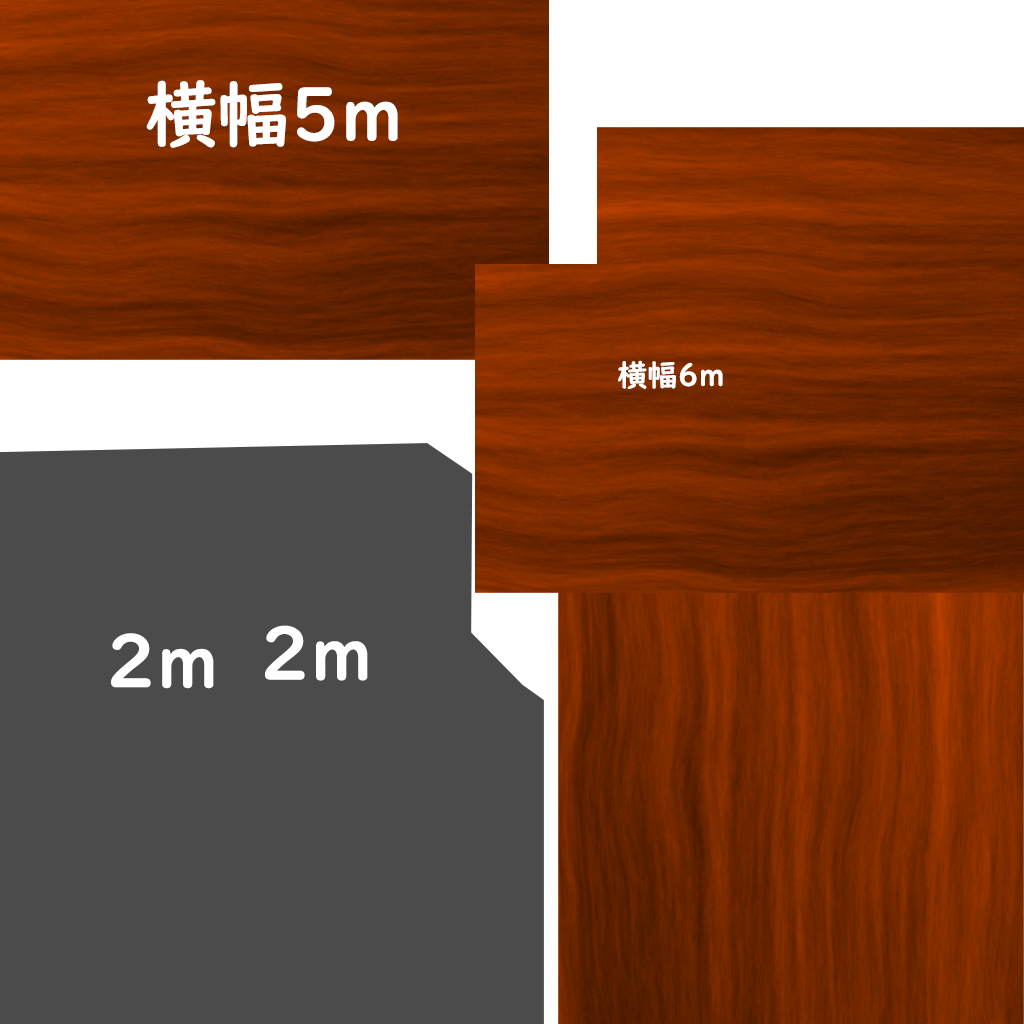
<style>
.page{position:relative;width:1024px;height:1024px;background:#4b4b4b}
.page>*{position:absolute;margin:0}
.t1{font:72px "UDDigiKyokashoNK-B";color:#ffffff}
.t2{font:30px "UDDigiKyokashoNK-B";color:#ffffff}
</style>
<div class="page">
<p class="t1" style="left:146px;top:80px;width:252px;height:68px">横幅5ｍ</p>
<p class="t2" style="left:618px;top:360px;width:105px;height:29px">横幅6ｍ</p>
<p class="t1" style="left:265px;top:625px;width:103px;height:56px">2m</p>
<p class="t1" style="left:111px;top:633px;width:103px;height:56px">2m</p>
</div>
